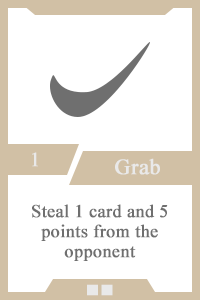
<style>
.page{position:relative;width:200px;height:300px;background:#ffffff}
.page>*{position:absolute;margin:0}
.t1{font:20px "TimesNewRomanPSMT";color:#e9e9e9;font-weight:bold}
.t2{font:22px "TimesNewRomanPSMT";color:#e9e9e9;font-weight:bold}
.t3{font:18px/20px "TimesNewRomanPSMT";color:#6f6f6f;font-weight:bold}
.t4{font:14px "AdobeHeitiStd-Regular";color:#e9e9e9;font-weight:bold}
</style>
<div class="page">
<p class="t1" style="left:32px;top:152px;width:6px;height:15px">1</p>
<p class="t2" style="left:115px;top:158px;width:45px;height:17px">Grab</p>
<p class="t3" style="left:32px;top:204px;width:136px;height:57px;text-align:center">Steal 1 card and 5 points from the opponent</p>
<p class="t4" style="left:87px;top:284px;width:26px;height:12px">■■</p>
</div>
